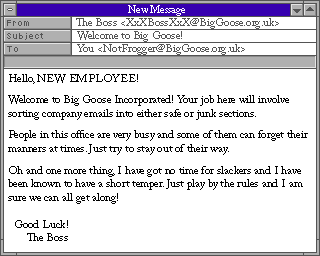
<style>
.page{position:relative;width:320px;height:256px;background:#ffffff}
.page>*{position:absolute;margin:0}
.t1{font:11.3px "ACaslonPro-Regular";color:#545454}
.t2{font:11.3px "ACaslonPro-Regular";color:#000000}
</style>
<div class="page">
<p class="t1" style="left:76px;top:18px;width:203px;height:11px">The Boss &lt;XxXBossXxX@BigGoose.org.uk&gt;</p>
<p class="t1" style="left:77px;top:31px;width:105px;height:11px">Welcome to Big Goose!</p>
<p class="t1" style="left:77px;top:44px;width:168px;height:11px">You &lt;NotFrogger@BigGoose.org.uk&gt;</p>
<p class="t2" style="left:8px;top:74px;width:300px;height:167px">Hello, NEW EMPLOYEE!<br><br>Welcome to Big Goose Incorporated! Your job here will involve<br>sorting company emails into either safe or junk sections.<br><br>People in this office are very busy and some of them can forget their<br>manners at times. Just try to stay out of their way.<br><br>Oh and one more thing, I have got no time for slackers and I have <br>been known to have a short temper. Just play by the rules and I am <br>sure we can all get along!<br><br>  Good Luck!<br>       The Boss</p>
</div>
